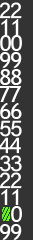
<style>
.page{position:relative;width:33px;height:240px;background:#333333}
.page>*{position:absolute;margin:0}
.t1{font:23px "AcuminConcept-Regular";color:#ffffff}
.t2{font:23px "TrebuchetMS";color:#ffffff}
</style>
<div class="page">
<p class="t1" style="left:0px;top:2px;width:11px;height:17px">2</p>
<p class="t1" style="left:10px;top:2px;width:12px;height:17px">2</p>
<p class="t2" style="left:1px;top:19px;width:7px;height:16px">1</p>
<p class="t2" style="left:12px;top:19px;width:7px;height:16px">1</p>
<p class="t2" style="left:0px;top:35px;width:11px;height:16px">0</p>
<p class="t2" style="left:11px;top:35px;width:11px;height:16px">0</p>
<p class="t2" style="left:0px;top:52px;width:11px;height:16px">9</p>
<p class="t2" style="left:11px;top:52px;width:11px;height:16px">9</p>
<p class="t2" style="left:0px;top:69px;width:11px;height:16px">8</p>
<p class="t2" style="left:11px;top:69px;width:11px;height:16px">8</p>
<p class="t2" style="left:0px;top:86px;width:10px;height:16px">7</p>
<p class="t2" style="left:10px;top:86px;width:11px;height:16px">7</p>
<p class="t2" style="left:0px;top:103px;width:11px;height:16px">6</p>
<p class="t2" style="left:11px;top:103px;width:11px;height:16px">6</p>
<p class="t1" style="left:0px;top:120px;width:11px;height:17px">5</p>
<p class="t1" style="left:11px;top:120px;width:11px;height:17px">5</p>
<p class="t1" style="left:0px;top:137px;width:10px;height:17px">4</p>
<p class="t1" style="left:9px;top:137px;width:12px;height:17px">4</p>
<p class="t1" style="left:0px;top:155px;width:11px;height:17px">3</p>
<p class="t1" style="left:11px;top:155px;width:11px;height:17px">3</p>
<p class="t1" style="left:0px;top:172px;width:11px;height:17px">2</p>
<p class="t1" style="left:10px;top:172px;width:12px;height:17px">2</p>
<p class="t2" style="left:1px;top:189px;width:7px;height:16px">1</p>
<p class="t2" style="left:12px;top:189px;width:7px;height:16px">1</p>
<p class="t2" style="left:0px;top:224px;width:11px;height:16px">9</p>
<p class="t2" style="left:11px;top:224px;width:11px;height:16px">9</p>
</div>
